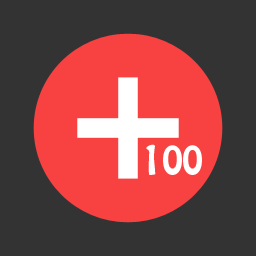
<style>
.page{position:relative;width:256px;height:256px;background:#333333}
.page>*{position:absolute;margin:0}
.t1{font:36px "HoboStd";color:#ffffff}
</style>
<div class="page">
<p class="t1" style="left:146px;top:144px;width:56px;height:31px">100</p>
</div>
